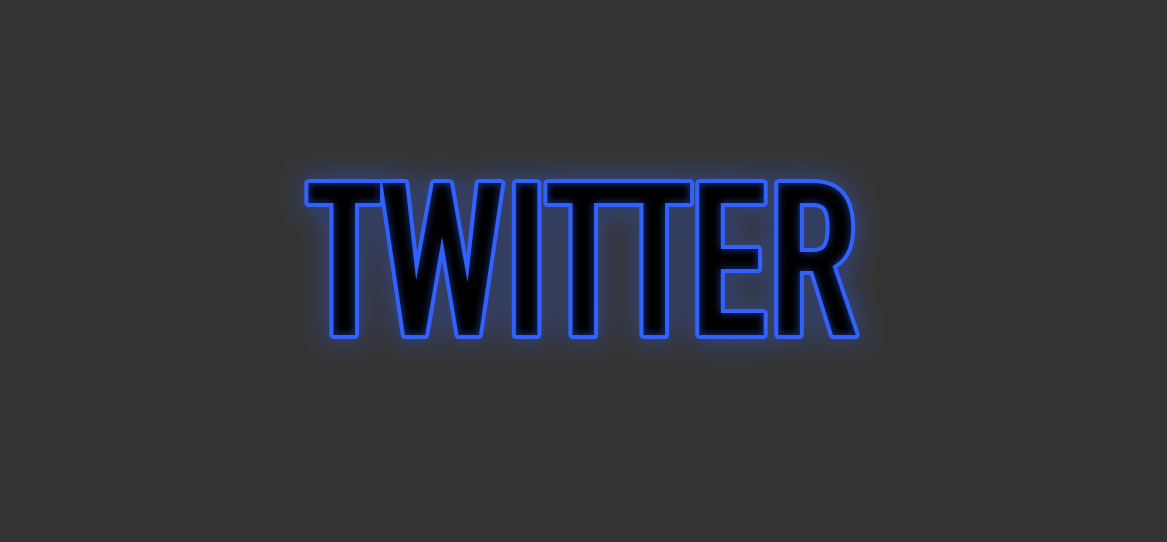
<style>
.page{position:relative;width:1167px;height:542px;background:#333333}
.page>*{position:absolute;margin:0}
.t1{font:212.1px "DINEngschrift";color:#03060f}
</style>
<div class="page">
<p class="t1" style="left:308px;top:182px;width:548px;height:154px">TWITTER</p>
</div>
